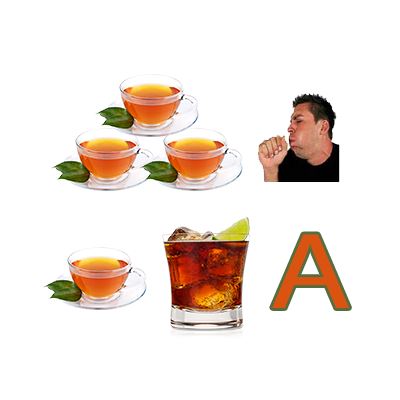
<style>
.page{position:relative;width:400px;height:400px;background:#ffffff}
.page>*{position:absolute;margin:0}
.t1{font:108.6px "MyriadPro-Regular";color:#db5310;scale:1.25 1}
</style>
<div class="page">
<p class="t1" style="left:272px;top:234px;width:77px;height:74px">A</p>
</div>
